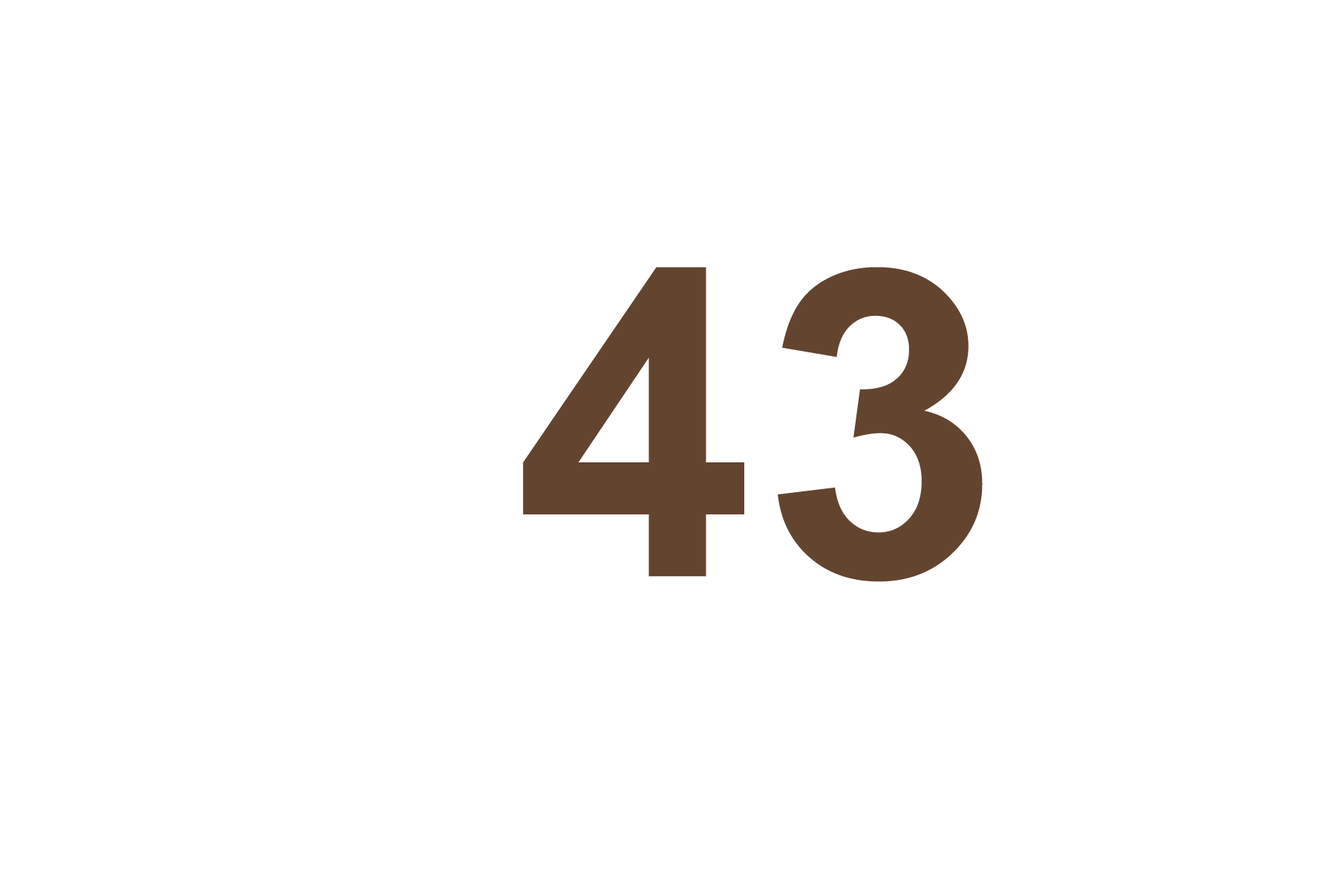
<style>
.page{position:relative;width:1337px;height:892px;background:#ffffff}
.page>*{position:absolute;margin:0}
.t1{font:429.6px "Arial-BoldMT";color:#63442f}
</style>
<div class="page">
<p class="t1" style="left:523px;top:267px;width:460px;height:315px">43</p>
</div>
